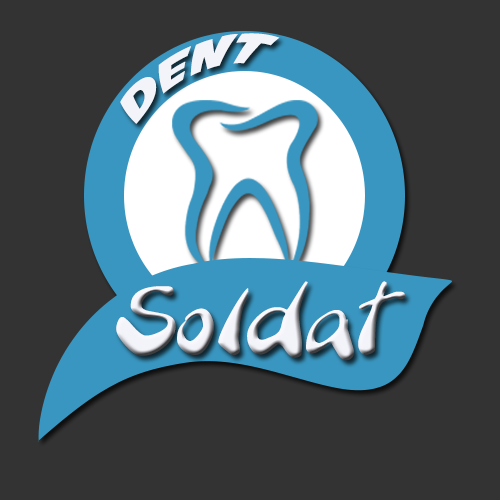
<style>
.page{position:relative;width:500px;height:500px;background:#333333}
.page>*{position:absolute;margin:0}
.t1{font:37.4px "AvengeanceMightiestAvenger";color:#f3f3fa;scale:1.28 1}
.t2{font:94.5px "BranchingMouse-Becker";color:#f3f3fa;scale:1.11 1}
</style>
<div class="page">
<p class="t1" style="left:120px;top:33px;width:160px;height:91px;rotate:-25deg">dent</p>
<p class="t2" style="left:116px;top:281px;width:290px;height:80px">Soldat</p>
</div>
